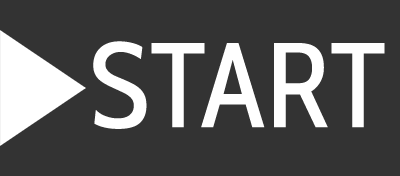
<style>
.page{position:relative;width:400px;height:176px;background:#333333}
.page>*{position:absolute;margin:0}
.t1{font:120px "CabinCondensed";color:#ffffff}
</style>
<div class="page">
<p class="t1" style="left:93px;top:41px;width:292px;height:88px">START</p>
</div>
